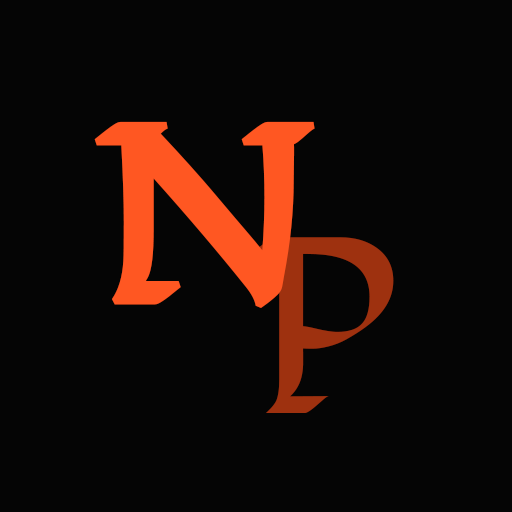
<style>
.page{position:relative;width:512px;height:512px;background:#050505}
.page>*{position:absolute;margin:0}
.t1{font:250px "Fondamento-Regular";color:#ff5722;font-weight:bold}
.t2{font:250px "Fondamento-Regular";color:#9e310f}
</style>
<div class="page">
<p class="t1" style="left:94px;top:121px;width:221px;height:187px">N</p>
<p class="t2" style="left:251px;top:237px;width:143px;height:176px">P</p>
</div>
